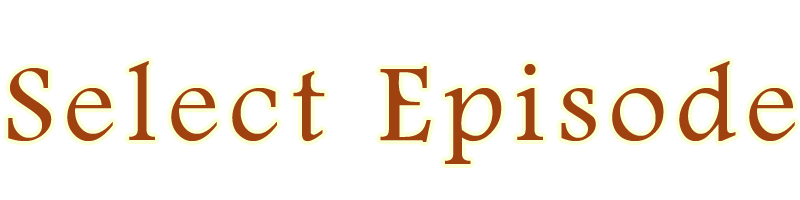
<style>
.page{position:relative;width:800px;height:200px;background:#ffffff}
.page>*{position:absolute;margin:0}
.t1{font:113.9px "FootlightMTLight";letter-spacing:0.1em;color:#a0420f}
</style>
<div class="page">
<p class="t1" style="left:8px;top:61px;width:787px;height:103px">Select Episode</p>
</div>
